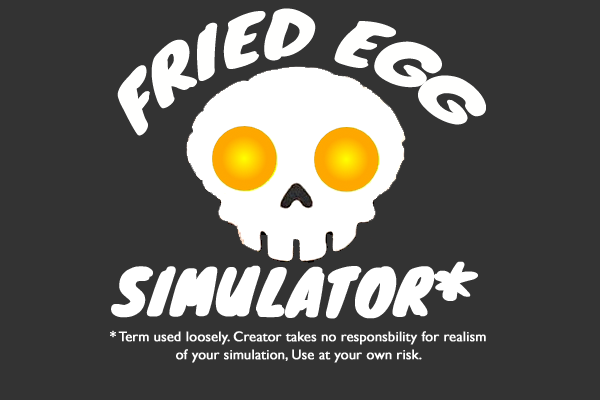
<style>
.page{position:relative;width:600px;height:400px;background:#333333}
.page>*{position:absolute;margin:0}
.t1{font:60px/24px "Knewave-Regular";color:#fffffe}
.t2{font:60px "Knewave-Regular";color:#ffffff;font-weight:bold}
.t3{font:14px/18px "GillSans";color:#ffffff;font-weight:bold}
</style>
<div class="page">
<p class="t1" style="left:117px;top:8px;width:369px;height:128px">FRIED EGG</p>
<p class="t2" style="left:111px;top:261px;width:367px;height:58px">SIMULATOR*</p>
<p class="t3" style="left:110px;top:330px;width:376px;height:33px;text-align:center">* Term used loosely. Creator takes no responsbility for realism<br>of your simulation, Use at your own risk.</p>
</div>
